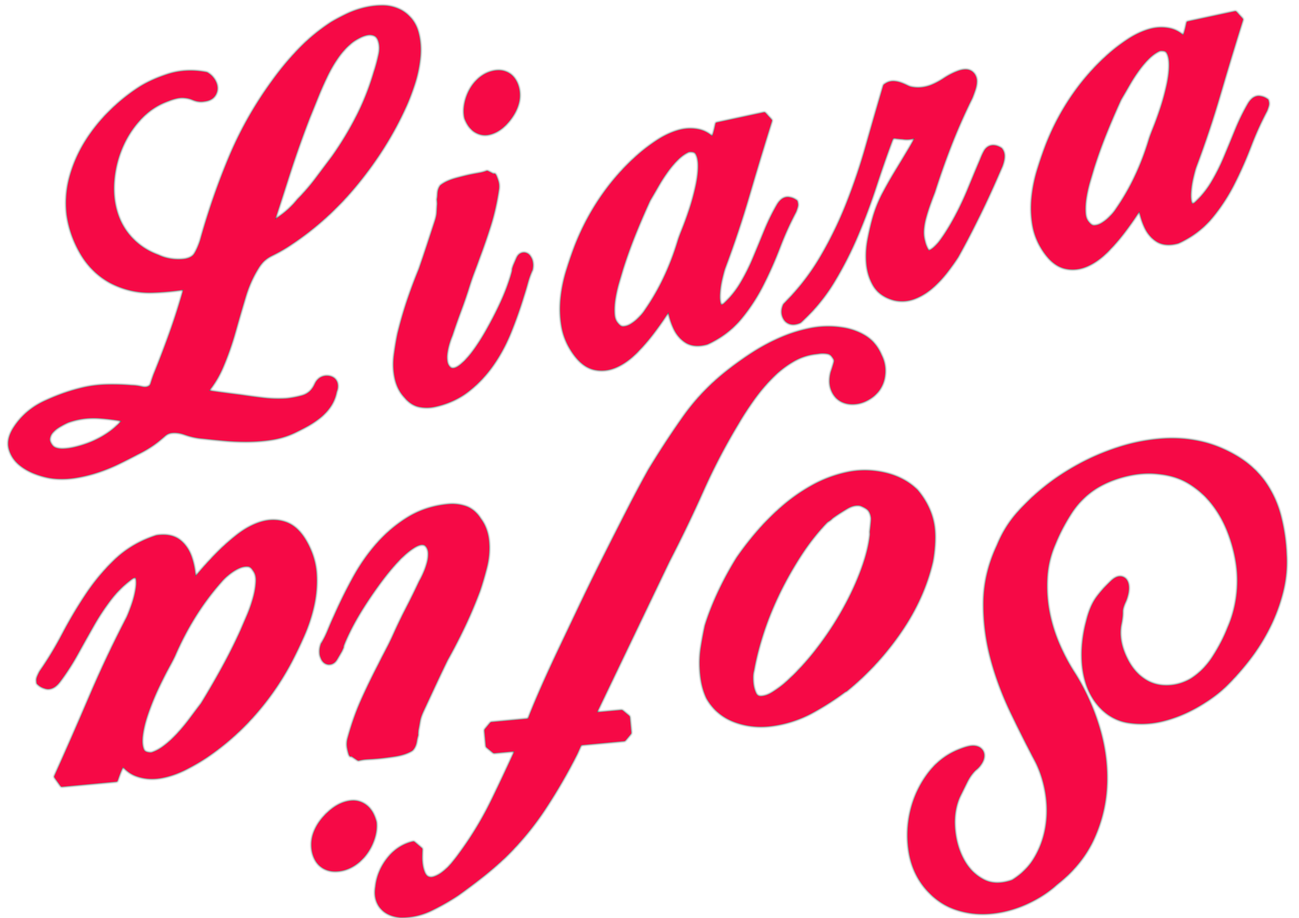
<style>
.page{position:relative;width:1299px;height:918px;background:#ffffff}
.page>*{position:absolute;margin:0}
.t1{font:459.7px "BirdsofParadise-PersonaluseOnly";letter-spacing:0.14em;color:#f60946;font-weight:bold}
.t2{font:516.8px "BirdsofParadise-PersonaluseOnly";letter-spacing:0.1em;color:#f60946;font-weight:bold}
</style>
<div class="page">
<p class="t1" style="left:8px;top:6px;width:1261px;height:473px;rotate:-12deg">Liara</p>
<p class="t2" style="left:36px;top:327px;width:1251px;height:591px;rotate:175deg">Sofia</p>
</div>
